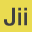
<style>
.page{position:relative;width:32px;height:32px;background:#eadb50}
.page>*{position:absolute;margin:0}
.t1{font:24px "HelveticaNeue";color:#404040;font-weight:bold}
</style>
<div class="page">
<p class="t1" style="left:4px;top:7px;width:23px;height:19px">Jii</p>
</div>
